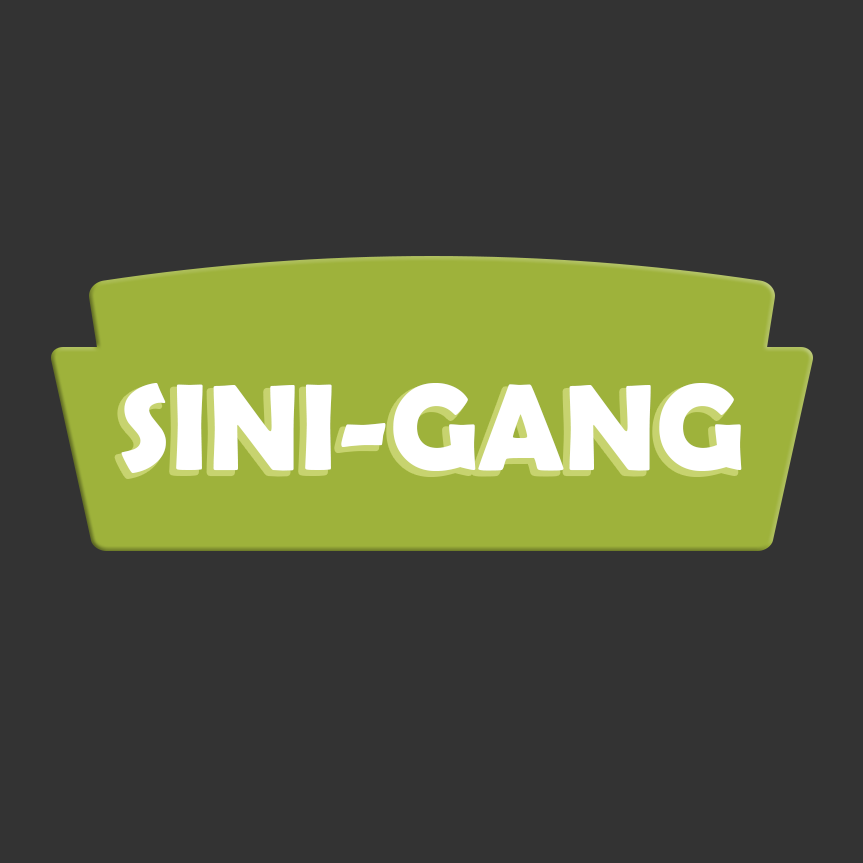
<style>
.page{position:relative;width:863px;height:863px;background:#333333}
.page>*{position:absolute;margin:0}
.t1{font:124px "BerlinSansFBDemi-Bold";color:#ffffff}
</style>
<div class="page">
<p class="t1" style="left:121px;top:383px;width:621px;height:90px">SINI-GANG</p>
</div>
